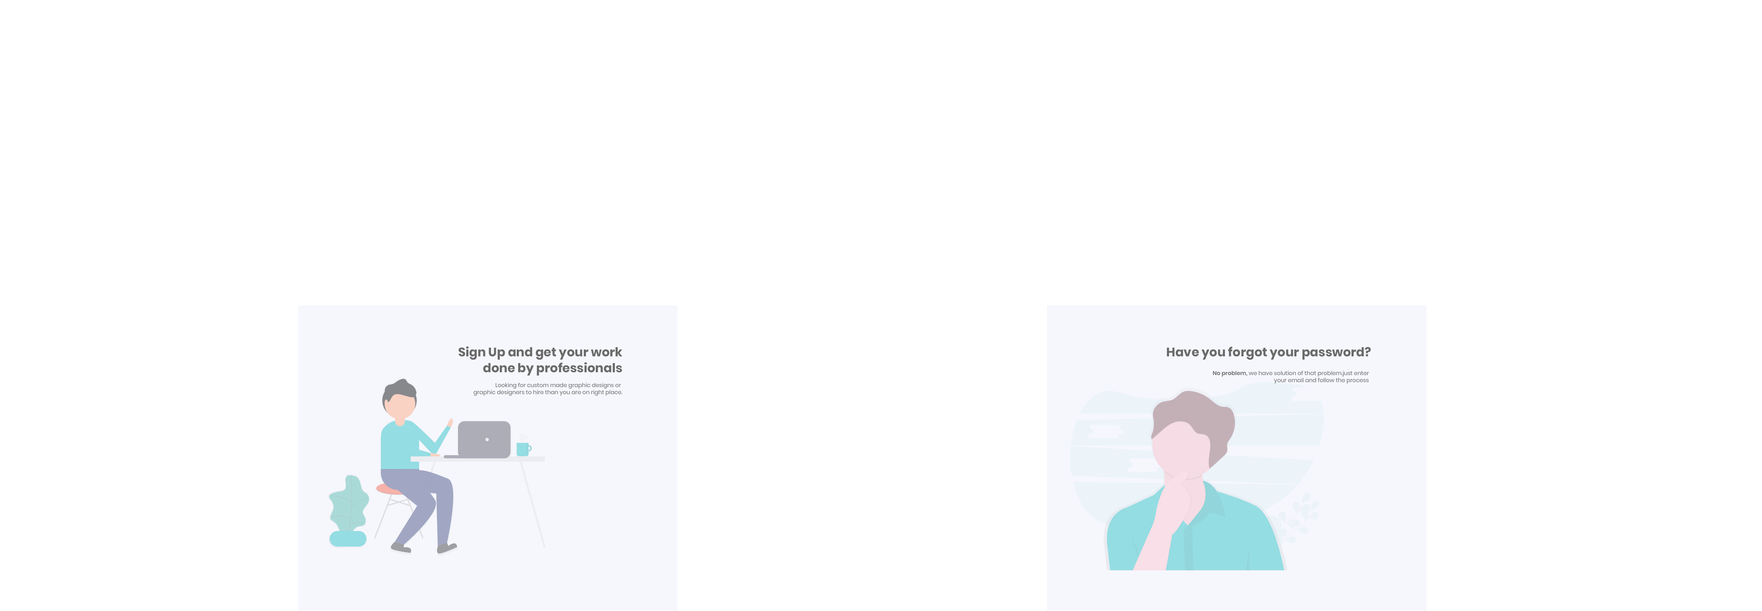
<style>
.page{position:relative;width:1762px;height:611px;background:#ffffff}
.page>*{position:absolute;margin:0}
.t1{font:12.4px/15.9px "Poppins-Bold";color:#6a6a6a}
.t2{font:12.4px "Poppins-Bold";color:#6a6a6a}
.t3{font:5.6px/7.1px "Poppins-Regular";color:#6a6a6a}
.t4{font:5.6px/7.1px "Poppins-SemiBold";color:#6a6a6a}
</style>
<div class="page">
<p class="t1" style="left:458px;top:346px;width:164px;height:30px;text-align:right">Sign Up and get your work<br>done by professionals</p>
<p class="t2" style="left:1167px;top:346px;width:204px;height:14px">Have you forgot your password?</p>
<p class="t3" style="left:1213px;top:370px;width:156px;height:14px;text-align:right"><span class="t4">No problem,</span> we have solution of that problem.just enter <br>your email and follow the process</p>
<p class="t3" style="left:473px;top:382px;width:149px;height:14px;text-align:right">Looking for custom made graphic designs or <br>graphic designers to hire than you are on right place.</p>
</div>
